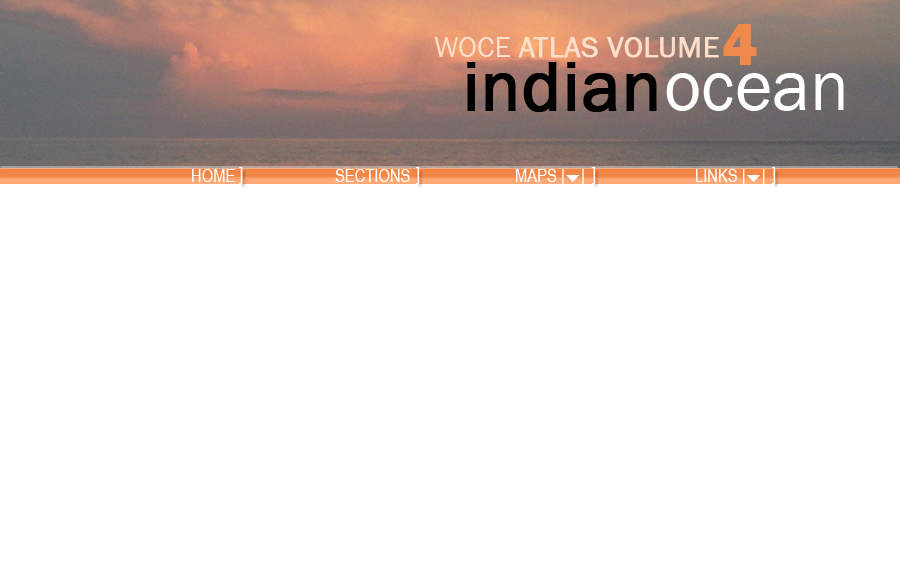
<style>
.page{position:relative;width:900px;height:580px;background:#ffffff}
.page>*{position:absolute;margin:0}
.t1{font:60px "FranklinGothic-Heavy";color:#f08a4c}
.t2{font:30px "FranklinGothic-Book";color:#fddeca;font-weight:bold}
.t3{font:30px "FranklinGothic-Book";color:#fddeca}
.t4{font:72px "FranklinGothic-Book";color:#000000;font-weight:bold}
.t5{font:72px "FranklinGothic-Book";color:#ffffff}
.t6{font:18px "ArialNarrow";color:#ffffff}
.t7{font:18px "Wingdings3";color:#ffffff}
.t8{font:18px "ArialMT";color:#ffffff}
</style>
<div class="page">
<p class="t1" style="left:723px;top:24px;width:34px;height:41px">4</p>
<p class="t2" style="left:434px;top:37px;width:285px;height:21px"><span class="t3">WOCE </span>ATLAS VOLUME</p>
<p class="t4" style="left:467px;top:62px;width:190px;height:50px">indian</p>
<p class="t5" style="left:666px;top:73px;width:178px;height:38px">ocean</p>
<p class="t6" style="left:192px;top:169px;width:573px;height:17px">HOME          SECTIONS             MAPS |<span class="t7"></span><span class="t8">|</span>               LINKS |<span class="t7"></span>|</p>
</div>
